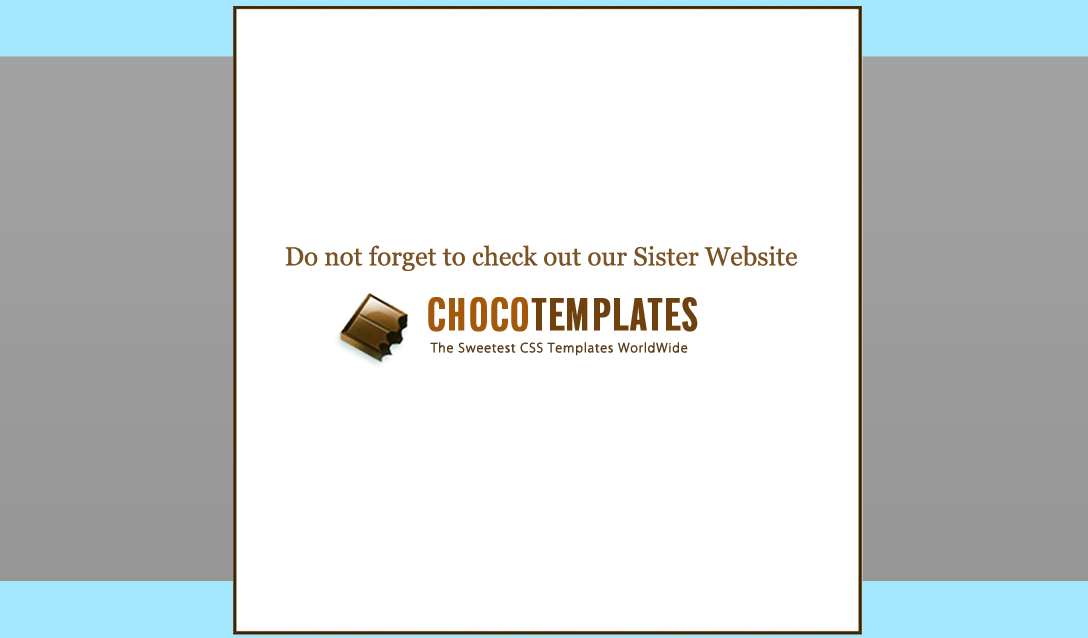
<style>
.page{position:relative;width:1088px;height:638px;background:#ffffff}
.page>*{position:absolute;margin:0}
.t1{font:25.9px "Georgia";color:#7a5123}
.t2{font:43.8px "NewsGothicBT-BoldExtraCondensed";letter-spacing:0.01em;color:#6f410f;font-weight:bold}
.t3{font:43.8px "NewsGothicBT-BoldExtraCondensed";letter-spacing:0.01em;color:#a4580b;font-weight:bold}
.t4{font:13.6px "MyriadPro-Light";letter-spacing:0.05em;color:#583d1b;font-weight:bold}
</style>
<div class="page">
<p class="t1" style="left:285px;top:245px;width:513px;height:26px">Do not forget to check out our Sister Website</p>
<p class="t2" style="left:428px;top:297px;width:270px;height:35px"><span class="t3">CHOCO</span>TEMPLATES</p>
<p class="t4" style="left:430px;top:342px;width:258px;height:14px">The Sweetest CSS Templates WorldWide</p>
</div>
